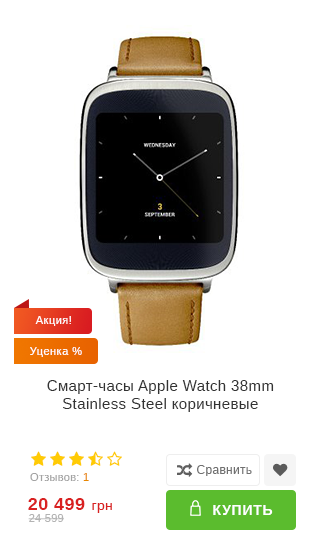
<style>
.page{position:relative;width:320px;height:550px;background:#ffffff}
.page>*{position:absolute;margin:0}
.t1{font:11px "Arimo";letter-spacing:0.045em;color:#ffffff}
.t2{font:15px "Arimo";letter-spacing:0.025em;color:#333333}
.t3{font:11px "Arimo";letter-spacing:0.025em;color:#a3a3a3}
.t4{font:11px "Arimo";letter-spacing:0.025em;color:#e88800}
.t5{font:12px "Arimo";letter-spacing:0.025em;color:#707070}
.t6{font:18px "Arimo-Bold";letter-spacing:0.025em;color:#d92121}
.t7{font:14px "Arimo";letter-spacing:0.025em;color:#d92121}
.t8{font:14px "Arimo-Bold";letter-spacing:0.05em;color:#ffffff}
.t9{font:11px "Arimo";letter-spacing:0.025em;color:#b3b3b3}
</style>
<div class="page">
<p class="t1" style="left:35px;top:316px;width:36px;height:10px">Акция!</p>
<p class="t1" style="left:30px;top:347px;width:52px;height:10px">Уценка %</p>
<p class="t2" style="left:47px;top:380px;width:227px;height:32px;text-align:center">Смарт-часы Apple Watch 38mm<br>Stainless Steel коричневые</p>
<p class="t3" style="left:30px;top:473px;width:59px;height:8px">Отзывов: <span class="t4">1</span></p>
<p class="t5" style="left:197px;top:465px;width:55px;height:11px">Сравнить</p>
<p class="t6" style="left:28px;top:498px;width:84px;height:15px">20 499 <span class="t7">грн</span></p>
<p class="t8" style="left:213px;top:505px;width:60px;height:10px">КУПИТЬ</p>
<p class="t9" style="left:28px;top:514px;width:36px;height:8px">24 599</p>
</div>
